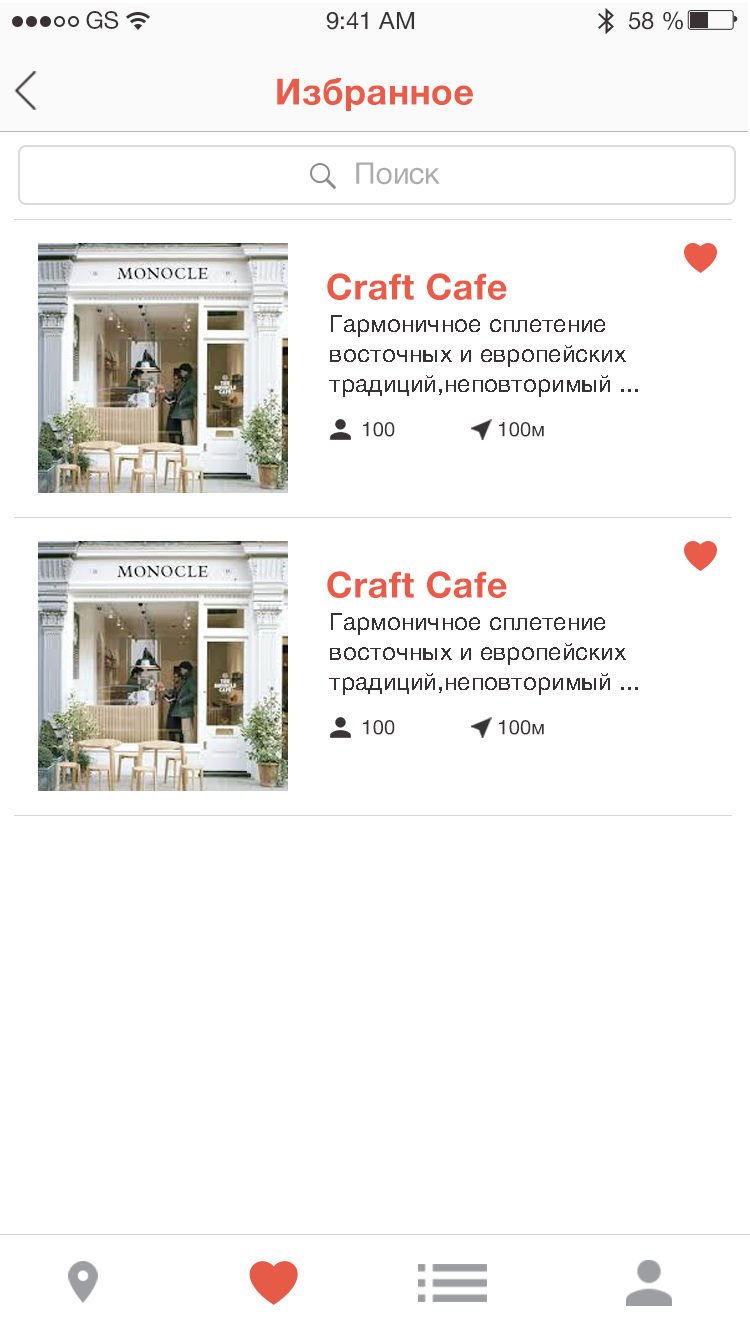
<style>
.page{position:relative;width:750px;height:1335px;background:#ffffff}
.page>*{position:absolute;margin:0}
.t1{font:24px "HelveticaNeueCyr-Roman";color:#383234}
.t2{font:36px "HelveticaNeueCyr-Bold";letter-spacing:0.012em;color:#e95c4a}
.t3{font:30px "HelveticaNeueCyr-Roman";letter-spacing:-0.016em;color:#acacac}
.t4{font:24px/30px "HelveticaNeueCyr-Roman";letter-spacing:0.012em;color:#383234}
.t5{font:20px "HelveticaNeueCyr-Roman";letter-spacing:0.016em;color:#373133}
</style>
<div class="page">
<p class="t1" style="left:86px;top:11px;width:33px;height:18px">GS</p>
<p class="t1" style="left:326px;top:11px;width:89px;height:19px">9:41 AM</p>
<p class="t1" style="left:628px;top:11px;width:55px;height:19px">58 %</p>
<p class="t2" style="left:277px;top:78px;width:196px;height:33px">Избранное</p>
<p class="t3" style="left:356px;top:162px;width:84px;height:23px">Поиск</p>
<p class="t2" style="left:327px;top:273px;width:180px;height:27px">Craft Cafe</p>
<p class="t4" style="left:329px;top:315px;width:309px;height:82px">Гармоничное сплетение восточных и европейских традиций,неповторимый ...</p>
<p class="t5" style="left:363px;top:422px;width:32px;height:15px">100</p>
<p class="t5" style="left:499px;top:422px;width:45px;height:15px">100м</p>
<p class="t2" style="left:327px;top:571px;width:180px;height:27px">Craft Cafe</p>
<p class="t4" style="left:329px;top:613px;width:309px;height:82px">Гармоничное сплетение восточных и европейских традиций,неповторимый ...</p>
<p class="t5" style="left:363px;top:720px;width:32px;height:15px">100</p>
<p class="t5" style="left:499px;top:720px;width:45px;height:15px">100м</p>
</div>
